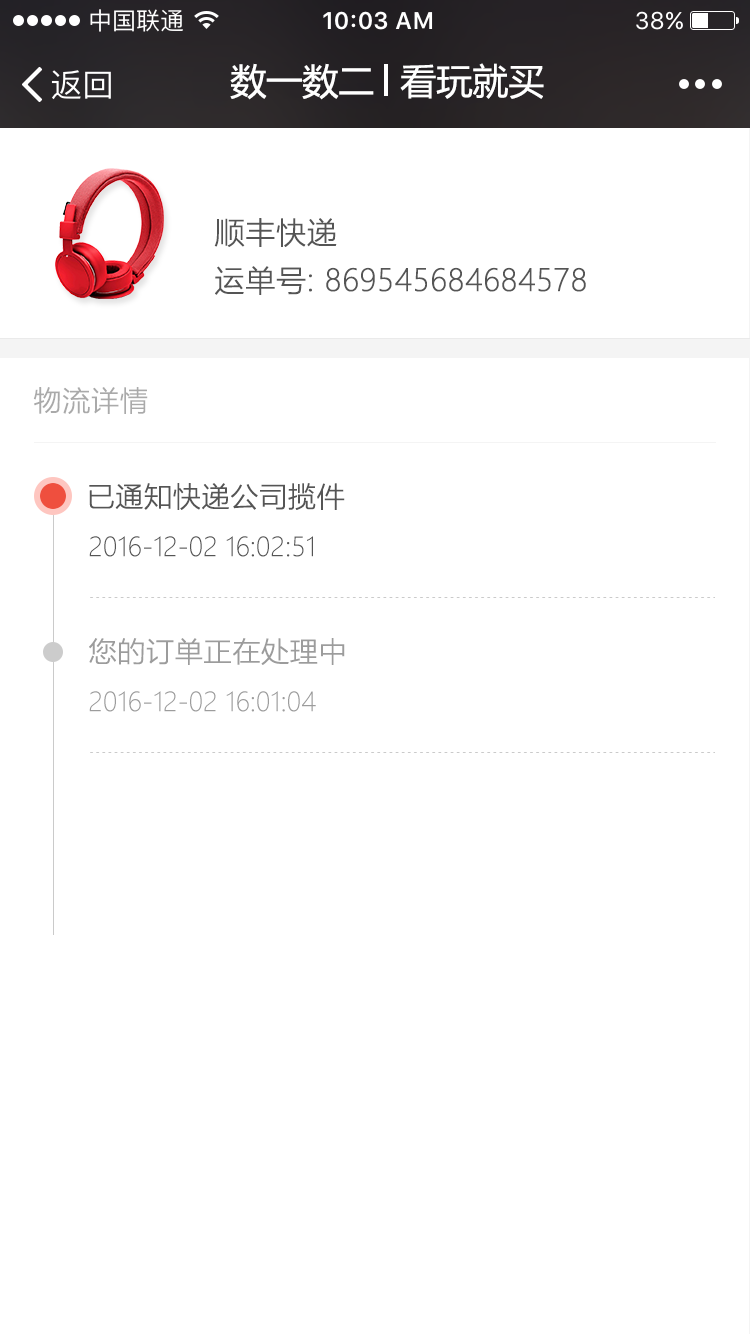
<style>
.page{position:relative;width:750px;height:1334px;background:#ffffff}
.page>*{position:absolute;margin:0}
.t1{font:36px "MicrosoftYaHei";color:#ffffff}
.t2{font:30px "MicrosoftYaHeiLight";color:#555555;font-weight:bold}
.t3{font:28px "MicrosoftYaHeiLight";color:#aaaaaa;font-weight:bold}
.t4{font:28px "MicrosoftYaHeiLight";color:#555555;font-weight:bold}
.t5{font:26px "MicrosoftYaHeiLight";color:#555555}
.t6{font:28px "MicrosoftYaHeiLight";color:#9c9c9c;font-weight:bold}
.t7{font:26px "MicrosoftYaHeiLight";color:#9c9c9c}
</style>
<div class="page">
<p class="t1" style="left:230px;top:63px;width:144px;height:37px">数一数二</p>
<p class="t1" style="left:400px;top:63px;width:144px;height:36px">看玩就买</p>
<p class="t2" style="left:214px;top:218px;width:123px;height:29px">顺丰快递</p>
<p class="t2" style="left:215px;top:266px;width:371px;height:29px">运单号: 869545684684578</p>
<p class="t3" style="left:33px;top:387px;width:115px;height:27px">物流详情</p>
<p class="t4" style="left:89px;top:483px;width:256px;height:27px">已通知快递公司揽件</p>
<p class="t5" style="left:89px;top:536px;width:224px;height:21px">2016-12-02 16:02:51</p>
<p class="t6" style="left:89px;top:638px;width:256px;height:27px">您的订单正在处理中</p>
<p class="t7" style="left:89px;top:691px;width:227px;height:21px">2016-12-02 16:01:04</p>
</div>
